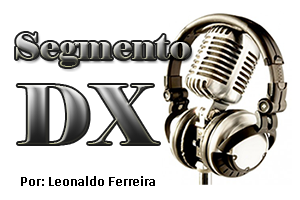
<style>
.page{position:relative;width:300px;height:200px;background:#ffffff}
.page>*{position:absolute;margin:0}
.t1{font:81.1px "Elephant-Regular"}
.t2{font:15px "Calibri-Bold";color:#000000}
</style>
<div class="page">
<p class="t1" style="left:17px;top:85px;width:142px;height:59px">DX</p>
<p class="t2" style="left:21px;top:176px;width:134px;height:10px">Por: Leonaldo Ferreira</p>
</div>
